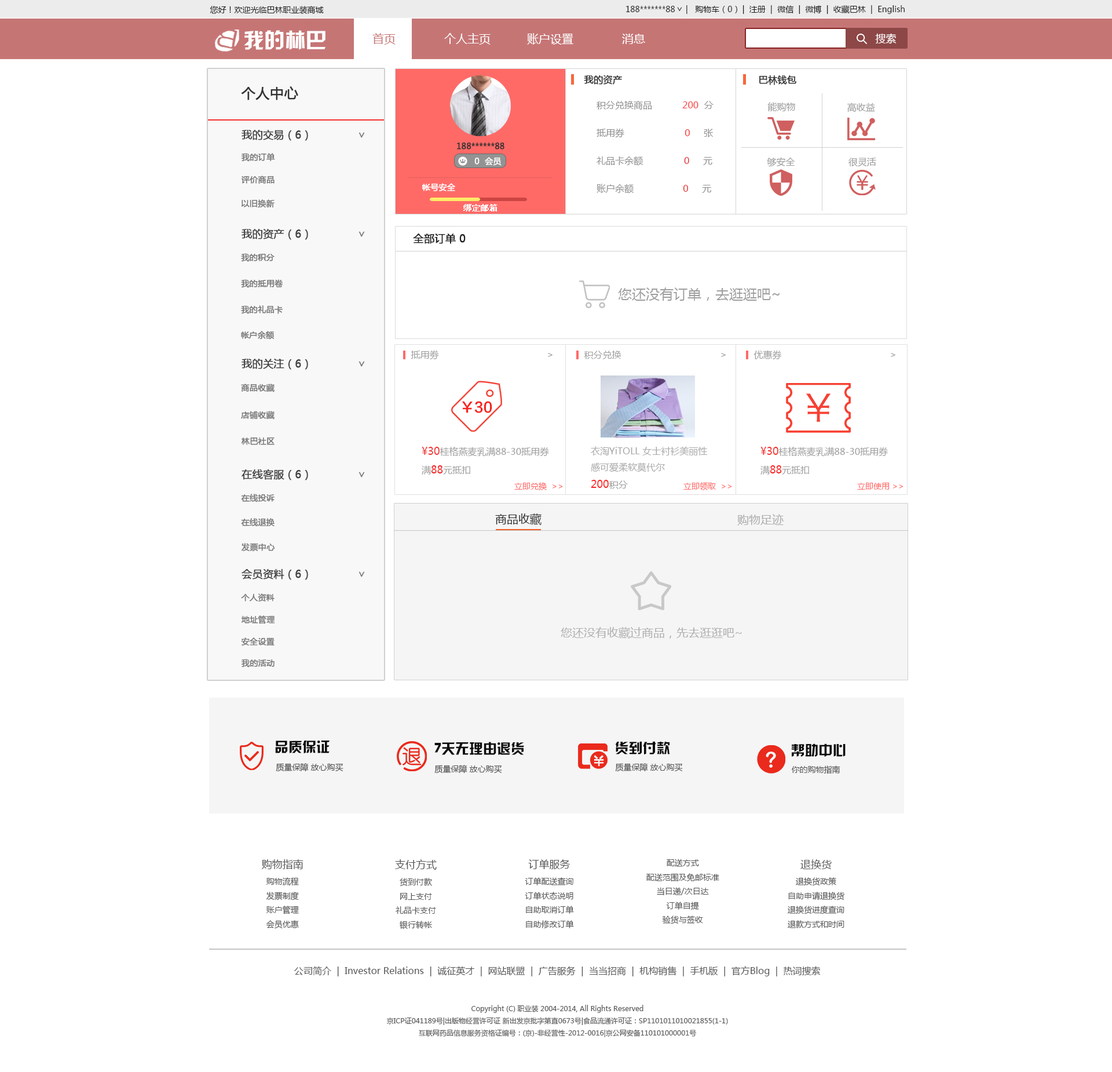
<style>
.page{position:relative;width:1112px;height:1072px;background:#ffffff}
.page>*{position:absolute;margin:0}
.t1{font:8.1px "MicrosoftYaHei";color:#1e1e1e}
.t2{font:8.3px "MicrosoftYaHei";scale:0.94 1}
.t3{font:20.9px "HYk2gj";color:#ffffff}
.t4{font:11.6px "MicrosoftYaHei";color:#c67575}
.t5{font:11.6px "MicrosoftYaHei";color:#ffffff}
.t6{font:10.4px "MicrosoftYaHei";color:#ffffff}
.t7{font:9.3px "MicrosoftYaHei";color:#373737;font-weight:bold}
.t8{font:13.9px "MicrosoftYaHei";color:#323232;font-weight:bold}
.t9{font:9.3px "MicrosoftYaHei";color:#9d9c9c}
.t10{font:10.4px "MicrosoftYaHei";color:#434343;font-weight:bold}
.t11{font:10.4px "MicrosoftYaHei";color:#787878;font-weight:bold}
.t12{font:8.1px "MicrosoftYaHei";color:#323232;font-weight:bold}
.t13{font:8.1px "MicrosoftYaHei";color:#787878;font-weight:bold}
.t14{font:8.1px "MicrosoftYaHei";color:#fefefe;font-weight:bold}
.t15{font:8.1px "MicrosoftYaHei";color:#ffffff;font-weight:bold}
.t16{font:8.1px "SimSun";color:#ffffff;font-weight:bold}
.t17{font:10.4px "MicrosoftYaHei";color:#222222;font-weight:bold}
.t18{font:13.9px "MicrosoftYaHei";color:#9f9f9f}
.t19{font:9.3px "MicrosoftYaHei";color:#9f9f9f}
.t20{font:13.9px "FZLTCHJW--GB1-0";color:#f62420}
.t21{font:10.4px "MicrosoftYaHei";color:#f23434}
.t22{font:10.4px "MicrosoftYaHei";color:#f62121}
.t23{font:9.3px "MicrosoftYaHei";color:#aaaaaa}
.t24{font:10.4px "MicrosoftYaHei";color:#fe2323}
.t25{font:9.3px "MicrosoftYaHei";color:#9d9d9d}
.t26{font:8.1px "MicrosoftYaHei";color:#ff6a67}
.t27{font:11.6px "MicrosoftYaHei";color:#2a2a2a}
.t28{font:11.6px "MicrosoftYaHei";color:#adadad}
.t29{font:11.6px "MicrosoftYaHei";color:#b0b0b0}
.t30{font:13.9px "HYk2gj";color:#080808}
.t31{font:13.9px "HYk2gj";color:#0d0d0d}
.t32{font:13.9px "HYk2gj";color:#090909}
.t33{font:13.9px "HYk2gj";color:#0b0b0b}
.t34{font:8.1px "MicrosoftYaHei";color:#4c4c4c}
.t35{font:8.1px "MicrosoftYaHei";color:#4e4e4e}
.t36{font:8.1px "MicrosoftYaHei";color:#505050}
.t37{font:8.1px "MicrosoftYaHei";color:#575757}
.t38{font:10.4px "MicrosoftYaHei";color:#575757}
.t39{font:9.3px "MicrosoftYaHei";color:#575757}
.t40{font:7px "MicrosoftYaHei";color:#575757}
</style>
<div class="page">
<p class="t1" style="left:210px;top:6px;width:114px;height:8px">您好！欢迎光临巴林职业装商城</p>
<p class="t1" style="left:626px;top:5px;width:279px;height:9px">188*******88                            |  注册  |  微信  |  微博  |  收藏巴林  |  English</p>
<p class="t1" style="left:687px;top:5px;width:51px;height:9px">|   购物车（0）</p>
<p class="t2" style="left:677px;top:7px;width:6px;height:5px;rotate:90deg">&gt;</p>
<p class="t3" style="left:244px;top:30px;width:82px;height:20px">我的林巴</p>
<p class="t4" style="left:373px;top:33px;width:23px;height:12px">首页</p>
<p class="t5" style="left:444px;top:33px;width:47px;height:12px">个人主页</p>
<p class="t5" style="left:527px;top:33px;width:47px;height:12px">账户设置</p>
<p class="t5" style="left:622px;top:34px;width:23px;height:10px">消息</p>
<p class="t6" style="left:875px;top:33px;width:22px;height:11px">搜索</p>
<p class="t7" style="left:584px;top:75px;width:38px;height:10px">我的资产</p>
<p class="t7" style="left:760px;top:75px;width:37px;height:10px">巴林钱包</p>
<p class="t8" style="left:241px;top:86px;width:57px;height:14px">个人中心</p>
<p class="t9" style="left:768px;top:102px;width:28px;height:10px">能购物</p>
<p class="t9" style="left:848px;top:103px;width:27px;height:9px">高收益</p>
<p class="t10" style="left:242px;top:130px;width:66px;height:11px">我的交易（6）</p>
<p class="t11" style="left:359px;top:132px;width:6px;height:6px;rotate:90deg">&gt;</p>
<p class="t12" style="left:457px;top:143px;width:48px;height:6px">188******88</p>
<p class="t13" style="left:242px;top:153px;width:33px;height:9px">我的订单</p>
<p class="t14" style="left:475px;top:157px;width:27px;height:9px">0  会员</p>
<p class="t9" style="left:767px;top:157px;width:29px;height:9px">够安全</p>
<p class="t9" style="left:849px;top:158px;width:28px;height:9px">很灵活</p>
<p class="t13" style="left:241px;top:176px;width:34px;height:8px">评价商品</p>
<p class="t15" style="left:422px;top:183px;width:33px;height:8px">帐号安全</p>
<p class="t13" style="left:241px;top:199px;width:34px;height:9px">以旧换新</p>
<p class="t16" style="left:464px;top:204px;width:34px;height:7px">绑定邮箱</p>
<p class="t10" style="left:242px;top:229px;width:66px;height:11px">我的资产（6）</p>
<p class="t11" style="left:359px;top:231px;width:6px;height:6px;rotate:90deg">&gt;</p>
<p class="t17" style="left:413px;top:233px;width:53px;height:11px">全部订单 0</p>
<p class="t13" style="left:241px;top:253px;width:34px;height:9px">我的积分</p>
<p class="t13" style="left:241px;top:279px;width:42px;height:9px">我的抵用卷</p>
<p class="t18" style="left:618px;top:287px;width:162px;height:14px">您还没有订单，去逛逛吧~</p>
<p class="t13" style="left:241px;top:305px;width:42px;height:9px">我的礼品卡</p>
<p class="t13" style="left:241px;top:331px;width:33px;height:9px">帐户余额</p>
<p class="t19" style="left:411px;top:350px;width:28px;height:10px">抵用劵</p>
<p class="t19" style="left:548px;top:353px;width:5px;height:4px">&gt;</p>
<p class="t19" style="left:584px;top:351px;width:38px;height:8px">积分兑换</p>
<p class="t19" style="left:721px;top:353px;width:5px;height:4px">&gt;</p>
<p class="t19" style="left:754px;top:350px;width:28px;height:10px">优惠券</p>
<p class="t19" style="left:891px;top:353px;width:5px;height:4px">&gt;</p>
<p class="t10" style="left:242px;top:359px;width:66px;height:11px">我的关注（6）</p>
<p class="t11" style="left:359px;top:361px;width:6px;height:6px;rotate:90deg">&gt;</p>
<p class="t13" style="left:241px;top:384px;width:34px;height:8px">商品收藏</p>
<p class="t20" style="left:462px;top:401px;width:30px;height:12px">￥30</p>
<p class="t13" style="left:241px;top:411px;width:34px;height:8px">店铺收藏</p>
<p class="t13" style="left:241px;top:437px;width:34px;height:8px">林巴社区</p>
<p class="t19" style="left:422px;top:447px;width:127px;height:28px"><span class="t21">¥30</span>桂格燕麦乳满88-30抵用券<br>满<span class="t22">88</span>元抵扣</p>
<p class="t23" style="left:591px;top:446px;width:117px;height:43px">衣淘YiTOLL 女士衬衫美丽性<br>感可爱柔软莫代尔  <br><span class="t24">200</span><span class="t25">积分</span></p>
<p class="t19" style="left:761px;top:447px;width:127px;height:28px"><span class="t21">¥30</span>桂格燕麦乳满88-30抵用券<br>满<span class="t22">88</span>元抵扣</p>
<p class="t10" style="left:242px;top:469px;width:66px;height:11px">在线客服（6）</p>
<p class="t11" style="left:359px;top:472px;width:6px;height:5px;rotate:90deg">&gt;</p>
<p class="t26" style="left:515px;top:482px;width:48px;height:8px">立即兑换  &gt;&gt;</p>
<p class="t26" style="left:684px;top:482px;width:48px;height:9px">立即领取  &gt;&gt;</p>
<p class="t26" style="left:858px;top:483px;width:45px;height:7px">立即使用 &gt;&gt;</p>
<p class="t13" style="left:241px;top:494px;width:34px;height:8px">在线投诉</p>
<p class="t13" style="left:241px;top:518px;width:34px;height:9px">在线退换</p>
<p class="t27" style="left:495px;top:513px;width:47px;height:12px">商品收藏</p>
<p class="t28" style="left:738px;top:514px;width:46px;height:12px">购物足迹</p>
<p class="t13" style="left:242px;top:543px;width:33px;height:9px">发票中心</p>
<p class="t10" style="left:242px;top:569px;width:66px;height:11px">会员资料（6）</p>
<p class="t11" style="left:359px;top:571px;width:6px;height:6px;rotate:90deg">&gt;</p>
<p class="t13" style="left:241px;top:593px;width:34px;height:8px">个人资料</p>
<p class="t13" style="left:241px;top:615px;width:34px;height:9px">地址管理</p>
<p class="t29" style="left:561px;top:627px;width:181px;height:12px">您还没有收藏过商品，先去逛逛吧~</p>
<p class="t13" style="left:241px;top:637px;width:34px;height:9px">安全设置</p>
<p class="t13" style="left:242px;top:659px;width:33px;height:8px">我的活动</p>
<p class="t30" style="left:275px;top:740px;width:55px;height:14px">品质保证</p>
<p class="t31" style="left:435px;top:742px;width:89px;height:13px">7天无理由退货</p>
<p class="t32" style="left:615px;top:741px;width:55px;height:14px">货到付款</p>
<p class="t33" style="left:791px;top:743px;width:55px;height:14px">帮助中心</p>
<p class="t34" style="left:276px;top:763px;width:68px;height:9px">质量保障 放心购买</p>
<p class="t35" style="left:435px;top:765px;width:67px;height:9px">质量保障 放心购买</p>
<p class="t36" style="left:615px;top:763px;width:68px;height:9px">质量保障 放心购买</p>
<p class="t37" style="left:791px;top:765px;width:50px;height:9px">你的购物指南</p>
<p class="t37" style="left:261px;top:859px;width:43px;height:70px;text-align:center"><span class="t38">购物指南<br></span>购物流程<br>发票制度<br>账户管理<br>会员优惠</p>
<p class="t37" style="left:395px;top:859px;width:42px;height:70px;text-align:center"><span class="t38">支付方式<br></span>货到付款<br>网上支付<br>礼品卡支付<br>银行转帐</p>
<p class="t37" style="left:525px;top:859px;width:49px;height:70px;text-align:center"><span class="t38">订单服务<br></span>订单配送查询<br>订单状态说明<br>自助取消订单<br>自助修改订单</p>
<p class="t37" style="left:647px;top:859px;width:73px;height:65px;text-align:center">配送方式<br>配送范围及免邮标准<br>当日递/次日达<br>订单自提<br>验货与签收</p>
<p class="t37" style="left:788px;top:859px;width:57px;height:69px;text-align:center"><span class="t38">退换货<br></span>退换货政策<br>自助申请退换货<br>退换货进度查询<br>退款方式和时间</p>
<p class="t39" style="left:294px;top:966px;width:526px;height:10px">公司简介  |  Investor Relations  |  诚征英才  |  网站联盟  |  广告服务  |  当当招商  |  机构销售  |  手机版  |  官方Blog  |  热词搜索</p>
<p class="t40" style="left:386px;top:1005px;width:342px;height:32px;text-align:center">Copyright (C) 职业装 2004-2014, All Rights Reserved<br>京ICP证041189号|出版物经营许可证 新出发京批字第直0673号|食品流通许可证：SP1101011010021855(1-1)<br>互联网药品信息服务资格证编号：(京)-非经营性-2012-0016|京公网安备110101000001号</p>
</div>
